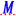
<style>
.page{position:relative;width:16px;height:16px;background:#ffffff}
.page>*{position:absolute;margin:0}
.t1{font:18.7px "FangSong_GB2312";color:#1200ff;text-transform:uppercase;font-weight:bold;font-style:italic}
.t2{font:8px "FangSong_GB2312";color:#ff001e;text-transform:uppercase;font-weight:bold;font-style:italic}
</style>
<div class="page">
<p class="t1" style="left:2px;top:0px;width:13px;height:14px">M</p>
<p class="t2" style="left:0px;top:13px;width:15px;height:3px">....</p>
</div>
